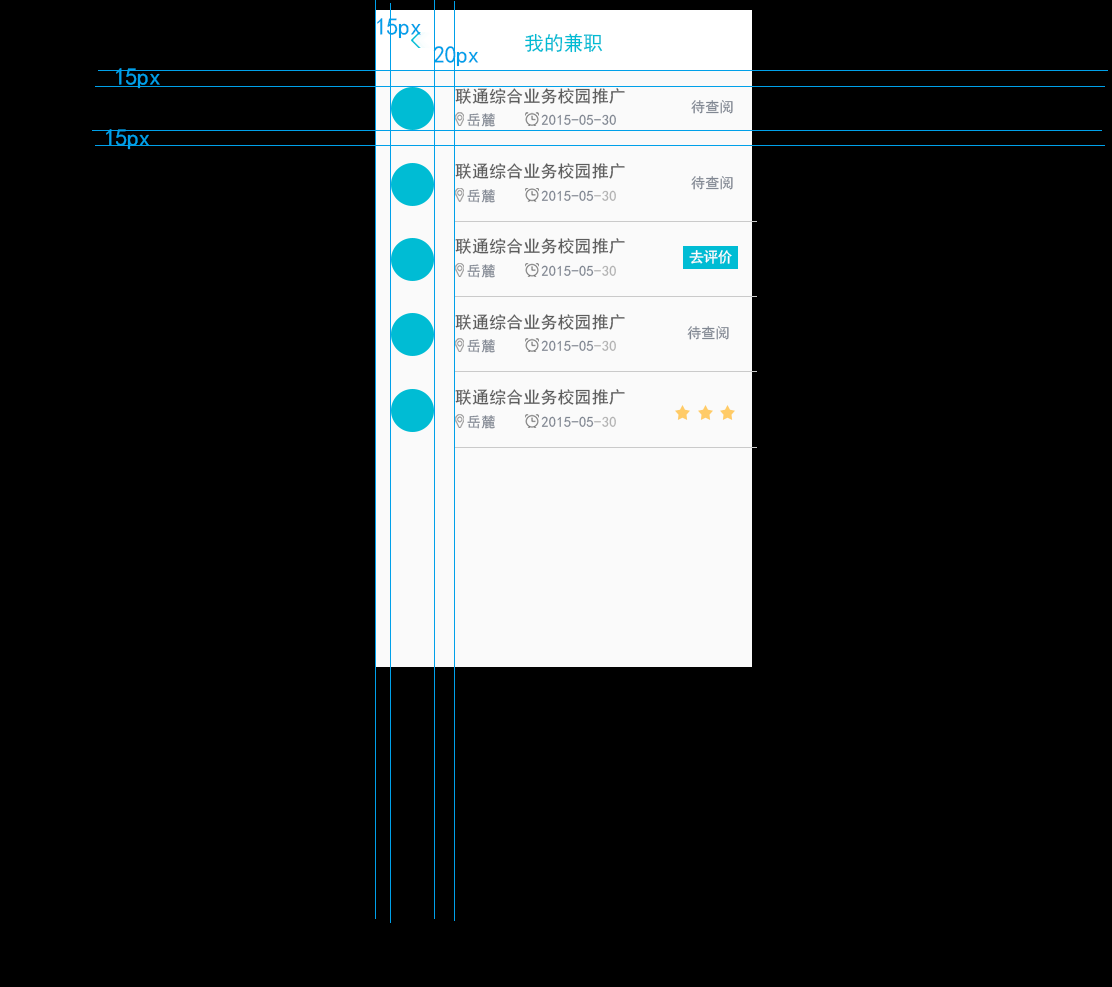
<style>
.page{position:relative;width:1112px;height:987px;background:#000000}
.page>*{position:absolute;margin:0}
.t1{font:24px "SimHei";letter-spacing:-0.02em;color:#00a0e9}
.t2{font:20.1px "SimHei";letter-spacing:-0.02em;color:#00bcd4}
.t3{font:16.7px "SimHei";letter-spacing:0.02em;color:#5d5d5d}
.t4{font:14.5px "SimHei";letter-spacing:-0.02em;color:#808792}
.t5{font:14.5px "SimHei";letter-spacing:0.02em;color:#808792}
.t6{font:14.5px "SimHei";letter-spacing:0.02em;color:#b2b2b2}
.t7{font:14.5px "SimHei";letter-spacing:-0.02em;color:#ffffff}
</style>
<div class="page">
<p class="t1" style="left:377px;top:18px;width:44px;height:21px">15px</p>
<p class="t2" style="left:525px;top:33px;width:78px;height:20px">我的兼职</p>
<p class="t1" style="left:433px;top:46px;width:46px;height:21px">20px</p>
<p class="t1" style="left:116px;top:68px;width:44px;height:21px">15px</p>
<p class="t3" style="left:455px;top:88px;width:170px;height:16px">联通综合业务校园推广</p>
<p class="t4" style="left:691px;top:100px;width:42px;height:14px">待查阅</p>
<p class="t5" style="left:467px;top:113px;width:28px;height:14px">岳麓</p>
<p class="t5" style="left:541px;top:114px;width:75px;height:11px">2015-05-30</p>
<p class="t1" style="left:106px;top:129px;width:44px;height:21px">15px</p>
<p class="t3" style="left:455px;top:163px;width:170px;height:16px">联通综合业务校园推广</p>
<p class="t4" style="left:691px;top:176px;width:42px;height:14px">待查阅</p>
<p class="t5" style="left:467px;top:189px;width:28px;height:14px">岳麓</p>
<p class="t5" style="left:541px;top:190px;width:75px;height:11px">2015-05<span class="t6">-30</span></p>
<p class="t3" style="left:455px;top:238px;width:170px;height:16px">联通综合业务校园推广</p>
<p class="t7" style="left:689px;top:250px;width:43px;height:14px">去评价</p>
<p class="t5" style="left:467px;top:264px;width:28px;height:14px">岳麓</p>
<p class="t5" style="left:541px;top:265px;width:75px;height:11px">2015-05<span class="t6">-30</span></p>
<p class="t3" style="left:455px;top:314px;width:170px;height:16px">联通综合业务校园推广</p>
<p class="t4" style="left:687px;top:326px;width:42px;height:14px">待查阅</p>
<p class="t5" style="left:467px;top:339px;width:28px;height:14px">岳麓</p>
<p class="t5" style="left:541px;top:340px;width:75px;height:11px">2015-05<span class="t6">-30</span></p>
<p class="t3" style="left:455px;top:389px;width:170px;height:16px">联通综合业务校园推广</p>
<p class="t5" style="left:467px;top:415px;width:28px;height:14px">岳麓</p>
<p class="t5" style="left:541px;top:416px;width:75px;height:11px">2015-05<span class="t6">-30</span></p>
</div>
